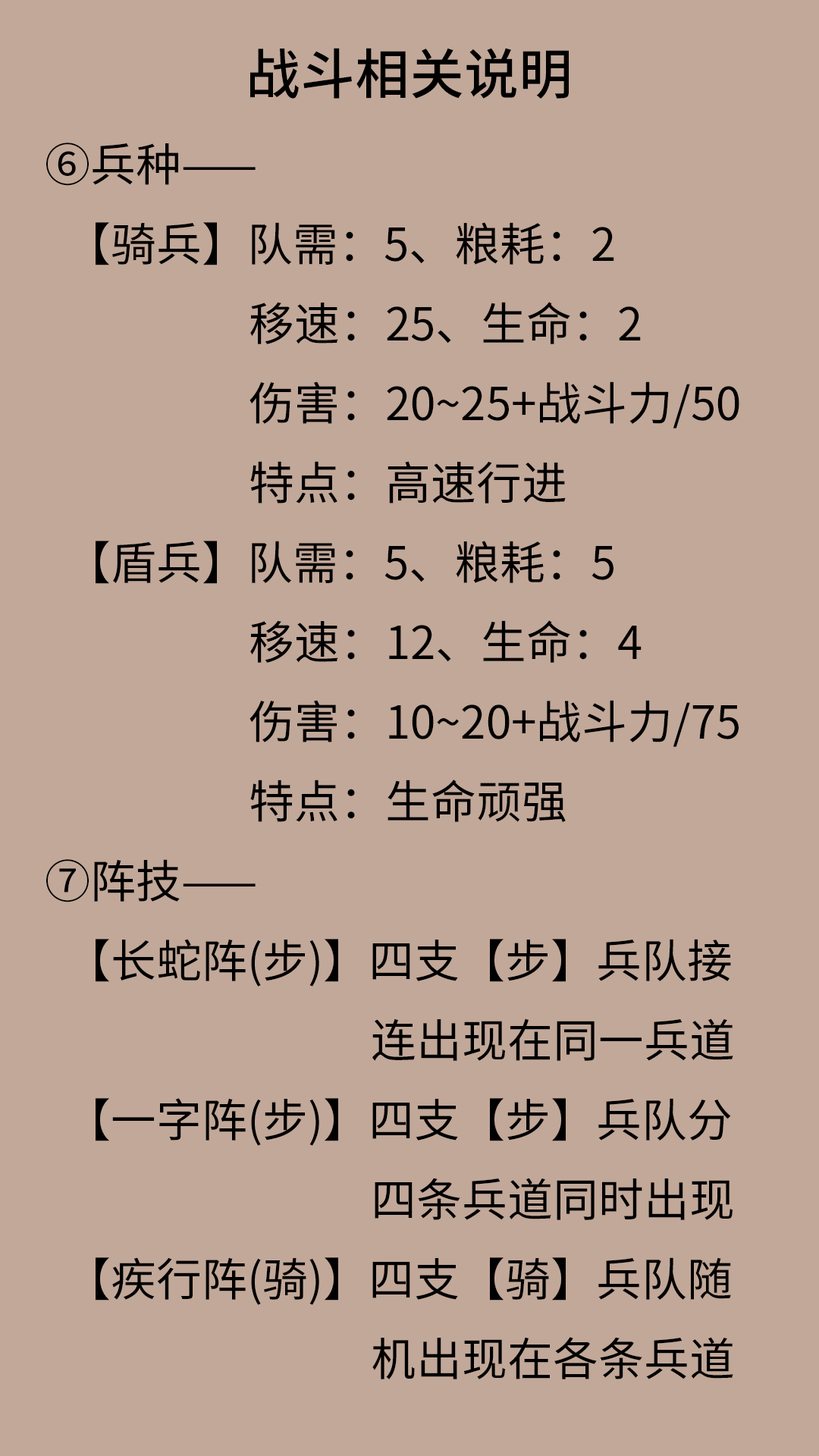
<style>
.page{position:relative;width:819px;height:1456px;background:#c2a899}
.page>*{position:absolute;margin:0}
.t1{font:45.5px "NotoSansHans-Regular";color:#000000}
.t2{font:54.6px "NotoSansHans-Medium";color:#000000}
</style>
<div class="page">
<p class="t1" style="left:46px;top:48px;width:693px;height:1331px;text-align:center"><span class="t2">战斗相关说明</span><br>⑥兵种——<br>  【骑兵】队需：5、粮耗：2<br>                    移速：25、生命：2<br>                    伤害：20~25+战斗力/50<br>                    特点：高速行进 <br>  【盾兵】队需：5、粮耗：5<br>                    移速：12、生命：4<br>                    伤害：10~20+战斗力/75<br>                    特点：生命顽强<br>⑦阵技——<br>  【长蛇阵(步)】四支【步】兵队接      <br>                                连出现在同一兵道<br>  【一字阵(步)】四支【步】兵队分      <br>                                四条兵道同时出现<br>  【疾行阵(骑)】四支【骑】兵队随      <br>                                机出现在各条兵道</p>
</div>
